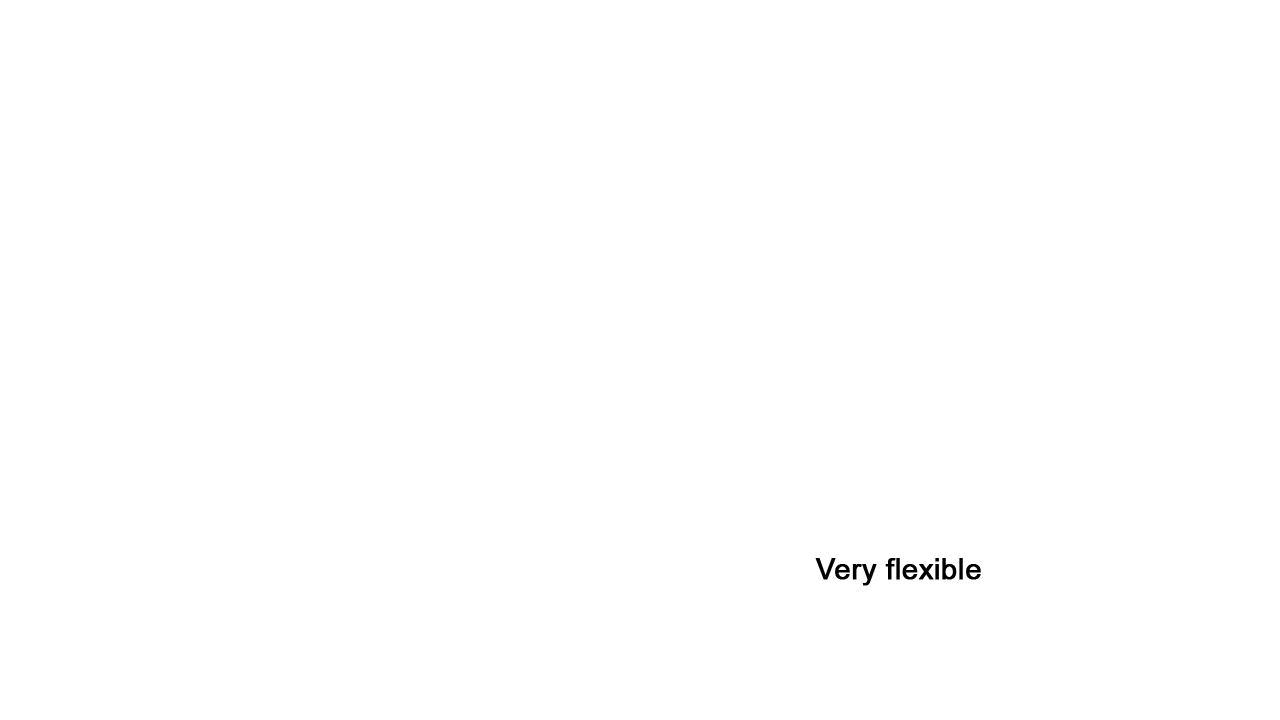
<style>
.page{position:relative;width:1280px;height:720px;background:#ffffff}
.page>*{position:absolute;margin:0}
.t1{font:28.9px "ArialMT";color:#000000;font-weight:bold}
</style>
<div class="page">
<p class="t1" style="left:815px;top:558px;width:166px;height:28px">Very flexible</p>
</div>
